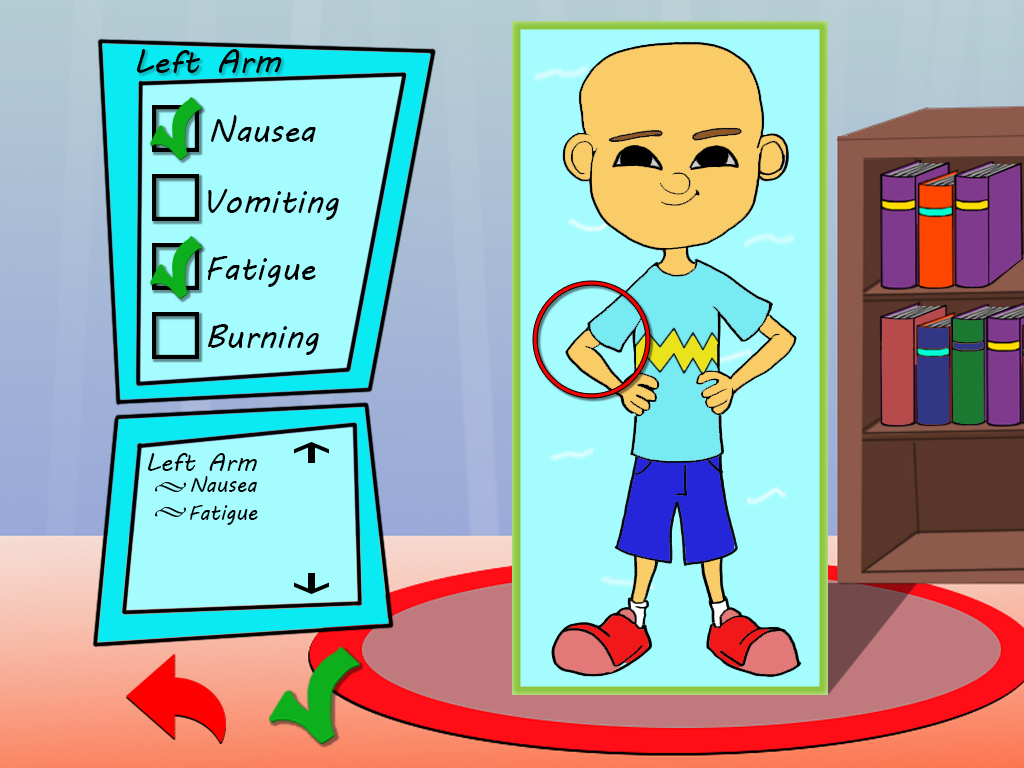
<style>
.page{position:relative;width:1024px;height:768px;background:#a4fcff}
.page>*{position:absolute;margin:0}
.t1{font:33.3px "MVBoli";color:#000000}
.t2{font:25px "MVBoli";color:#000000}
.t3{font:20.8px "MVBoli";color:#000000}
</style>
<div class="page">
<p class="t1" style="left:136px;top:49px;width:146px;height:24px">Left Arm</p>
<p class="t1" style="left:210px;top:115px;width:106px;height:27px">Nausea</p>
<p class="t1" style="left:208px;top:189px;width:131px;height:31px">Vomiting</p>
<p class="t1" style="left:207px;top:256px;width:109px;height:31px">Fatigue</p>
<p class="t1" style="left:208px;top:324px;width:111px;height:31px">Burning</p>
<p class="t2" style="left:148px;top:453px;width:109px;height:18px">Left Arm</p>
<p class="t3" style="left:191px;top:476px;width:66px;height:16px">Nausea</p>
<p class="t3" style="left:190px;top:505px;width:68px;height:20px">Fatigue</p>
</div>
